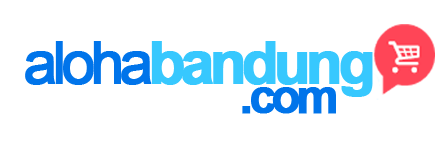
<style>
.page{position:relative;width:448px;height:144px;background:#ffffff}
.page>*{position:absolute;margin:0}
.t1{font:57.5px "Arial-BoldMT";letter-spacing:-0.1em;color:#37c8fe;font-weight:bold;scale:1.04 1}
.t2{font:57.5px "ArialMT";letter-spacing:-0.1em;color:#0074ea;font-weight:bold;scale:1.04 1}
.t3{font:47.1px "Arial-BoldMT";letter-spacing:-0.1em;color:#0074ea;font-weight:bold}
</style>
<div class="page">
<p class="t1" style="left:25px;top:41px;width:348px;height:56px"><span class="t2">aloha</span>bandung</p>
<p class="t3" style="left:242px;top:87px;width:94px;height:27px">.com</p>
</div>
